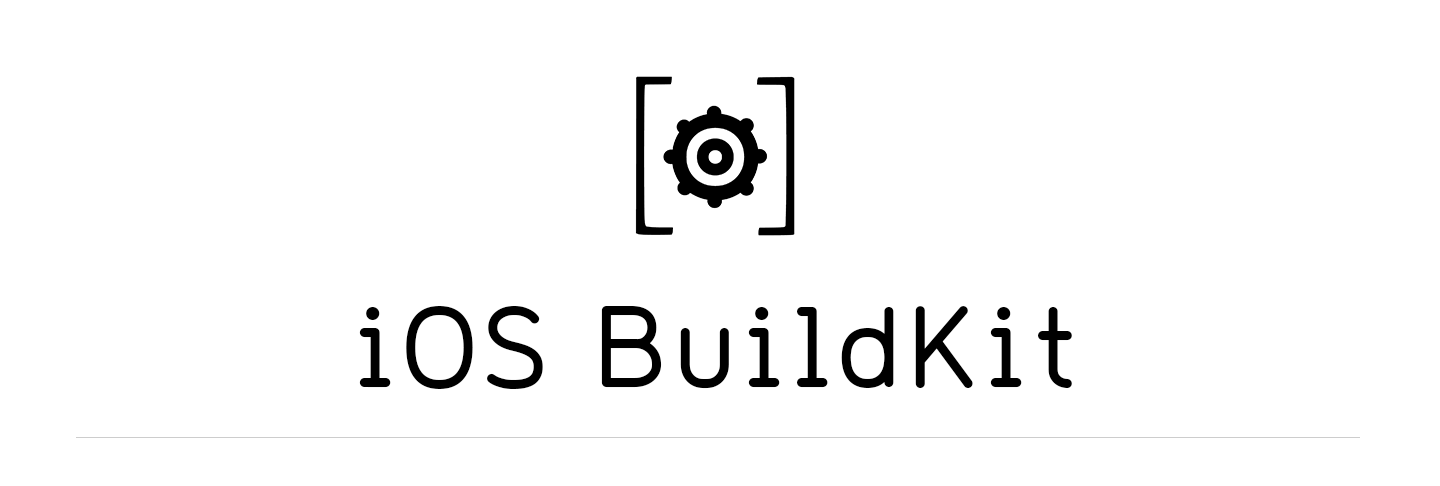
<style>
.page{position:relative;width:1440px;height:486px;background:#ffffff}
.page>*{position:absolute;margin:0}
.t1{font:109.9px "Range";color:#000000}
</style>
<div class="page">
<p class="t1" style="left:359px;top:306px;width:713px;height:83px">iOS BuildKit</p>
</div>
